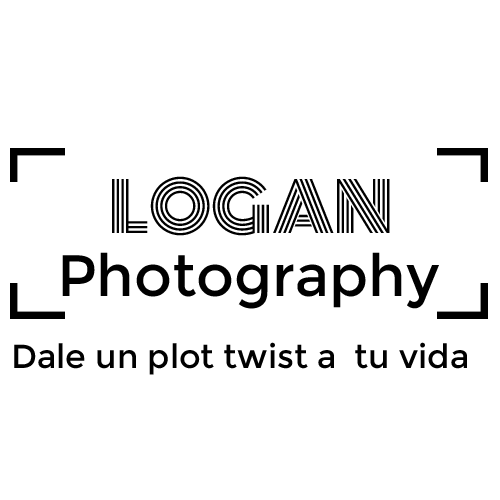
<style>
.page{position:relative;width:500px;height:500px;background:#ffffff}
.page>*{position:absolute;margin:0}
.t1{font:66.7px "Monoton-Regular";color:#000000}
.t2{font:58.3px "Montserrat-Regular";color:#000000}
.t3{font:33.3px "Montserrat-Regular";color:#000000}
</style>
<div class="page">
<p class="t1" style="left:112px;top:176px;width:278px;height:60px">LOGAN</p>
<p class="t2" style="left:62px;top:252px;width:377px;height:57px">Photography</p>
<p class="t3" style="left:14px;top:342px;width:453px;height:33px">Dale un plot twist a  tu vida</p>
</div>
